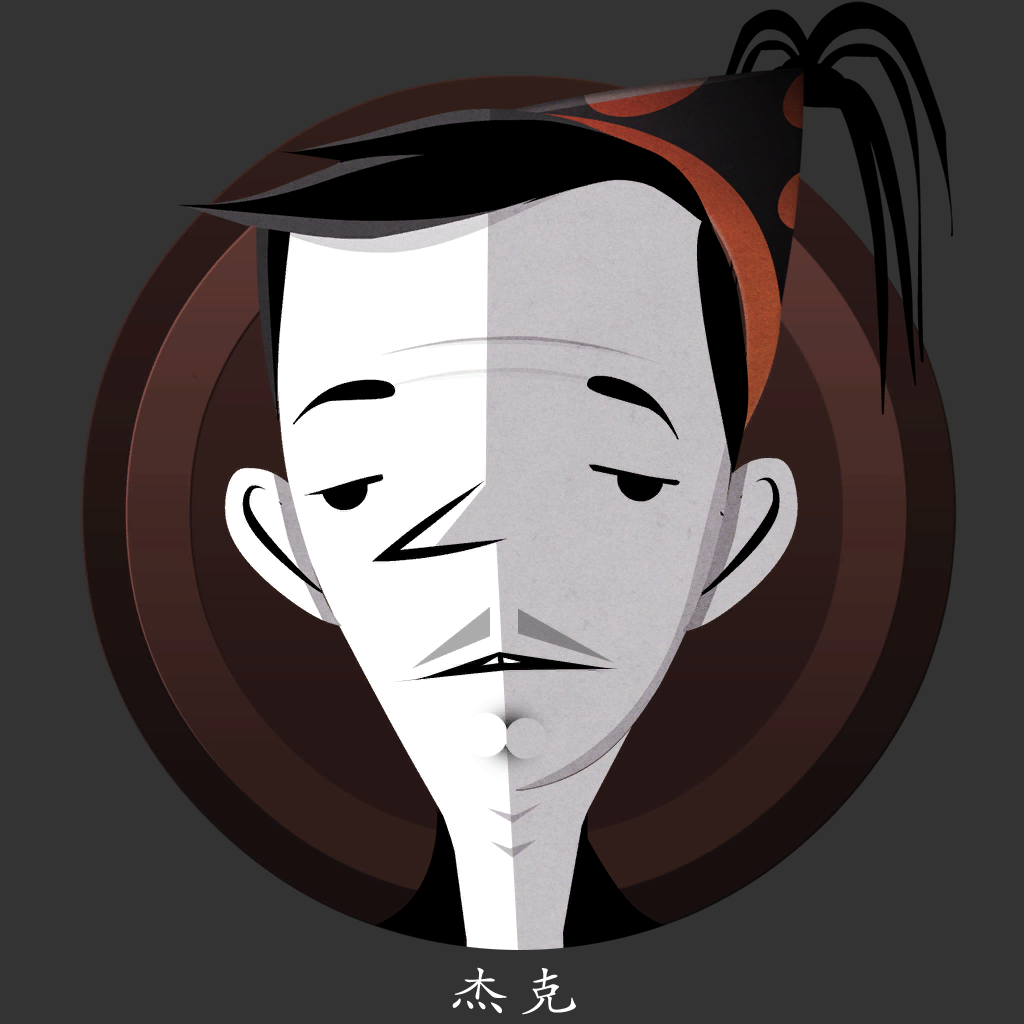
<style>
.page{position:relative;width:1024px;height:1024px;background:#333333}
.page>*{position:absolute;margin:0}
.t1{font:53.3px "STKaiti";letter-spacing:0.1em;color:#ffffff}
</style>
<div class="page">
<p class="t1" style="left:452px;top:967px;width:124px;height:48px">杰克</p>
</div>
